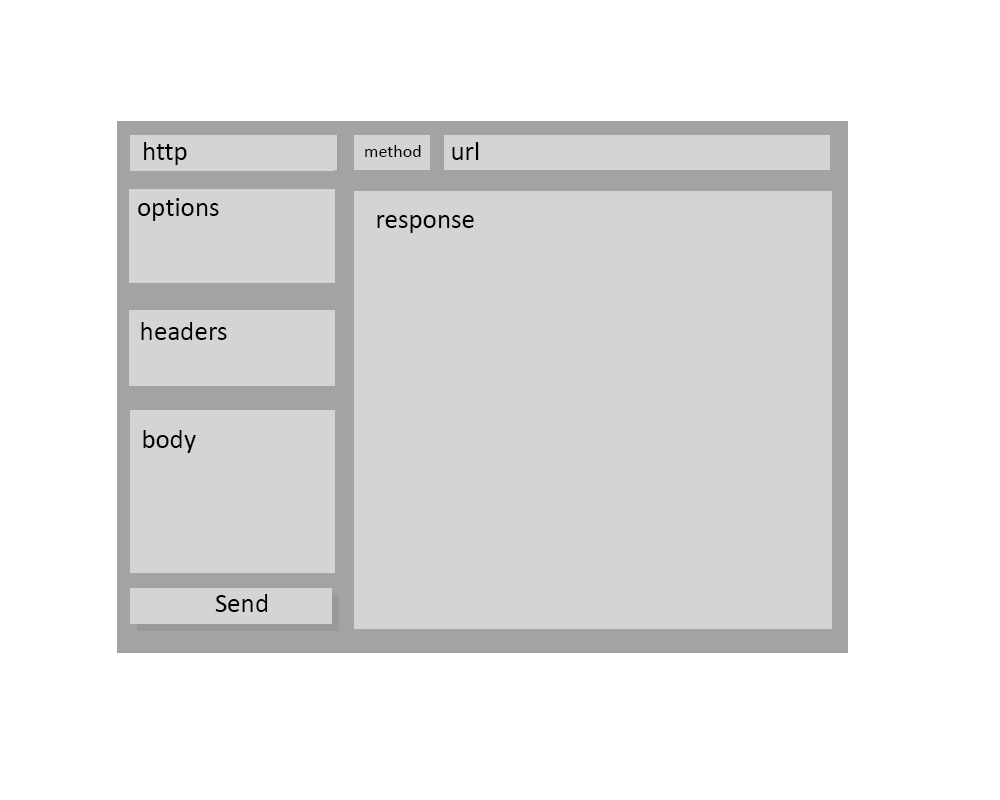
<style>
.page{position:relative;width:1000px;height:800px;background:#ffffff}
.page>*{position:absolute;margin:0}
.t1{font:27px "Calibri";color:#000000}
.t2{font:18px "Calibri";color:#000000}
</style>
<div class="page">
<p class="t1" style="left:144px;top:142px;width:43px;height:23px">http</p>
<p class="t2" style="left:365px;top:145px;width:56px;height:12px">method</p>
<p class="t1" style="left:452px;top:142px;width:27px;height:18px">url</p>
<p class="t1" style="left:138px;top:198px;width:81px;height:23px">options</p>
<p class="t1" style="left:377px;top:215px;width:97px;height:18px">response</p>
<p class="t1" style="left:141px;top:322px;width:86px;height:18px">headers</p>
<p class="t1" style="left:143px;top:430px;width:53px;height:23px">body</p>
<p class="t1" style="left:215px;top:594px;width:53px;height:18px">Send</p>
</div>
